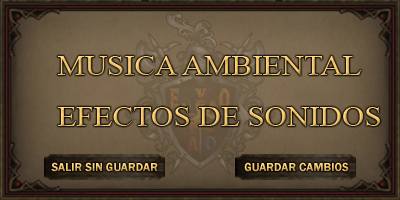
<style>
.page{position:relative;width:400px;height:200px}
.page>*{position:absolute;margin:0}
.t1{font:28.2px "TimesNewRomanPSMT";scale:1.1 1}
.t2{font:12px "FranklinGothic-Demi"}
</style>
<div class="page">
<p class="t1" style="left:58px;top:56px;width:303px;height:20px">MUSICA AMBIENTAL</p>
<p class="t1" style="left:58px;top:107px;width:322px;height:20px">EFECTOS DE SONIDOS</p>
<p class="t2" style="left:51px;top:162px;width:107px;height:10px">SALIR SIN GUARDAR</p>
<p class="t2" style="left:244px;top:162px;width:105px;height:10px">GUARDAR CAMBIOS</p>
</div>
